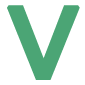
<style>
.page{position:relative;width:85px;height:85px;background:#ffffff}
.page>*{position:absolute;margin:0}
.t1{font:130px "Verdana";letter-spacing:0.05em;color:#4ba575;font-weight:bold}
</style>
<div class="page">
<p class="t1" style="left:7px;top:5px;width:73px;height:75px">v</p>
</div>
